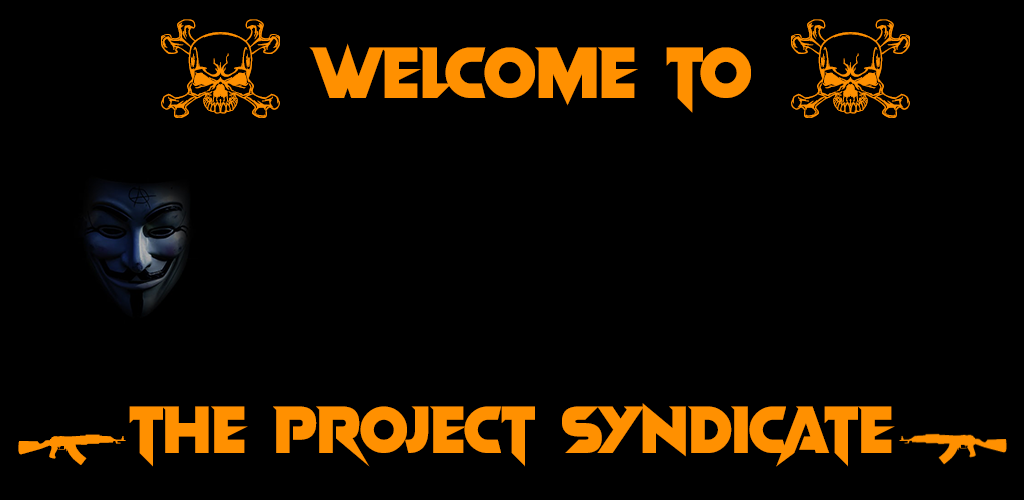
<style>
.page{position:relative;width:1024px;height:500px;background:#000000}
.page>*{position:absolute;margin:0}
.t1{font:125px "onlyskulls";color:#ff9000}
.t2{font:74px "VampireWars";color:#ff9000}
.t3{font:68px "VampireWars";color:#ff9000}
.t4{font:31px "2ndAmendment";color:#ff9000}
</style>
<div class="page">
<p class="t1" style="left:161px;top:19px;width:119px;height:99px">d</p>
<p class="t1" style="left:791px;top:19px;width:119px;height:99px">d</p>
<p class="t2" style="left:309px;top:43px;width:442px;height:70px">Welcome To</p>
<p class="t3" style="left:129px;top:403px;width:766px;height:64px">The Project Syndicate</p>
<p class="t4" style="left:18px;top:434px;width:108px;height:31px">c</p>
</div>
